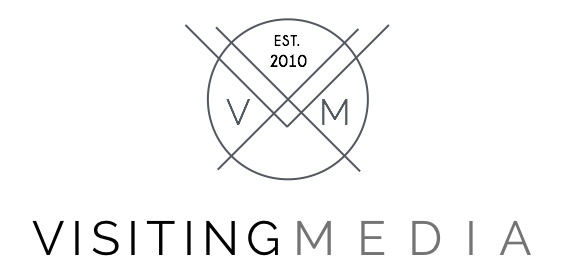
<style>
.page{position:relative;width:573px;height:280px;background:#ffffff}
.page>*{position:absolute;margin:0}
.t1{font:48px "Raleway";letter-spacing:0.15em;color:#000000}
.t2{font:48px "Raleway";letter-spacing:0.46em;color:#747474}
</style>
<div class="page">
<p class="t1" style="left:32px;top:220px;width:246px;height:36px">VISITING</p>
<p class="t2" style="left:297px;top:220px;width:234px;height:35px">MEDIA</p>
</div>
